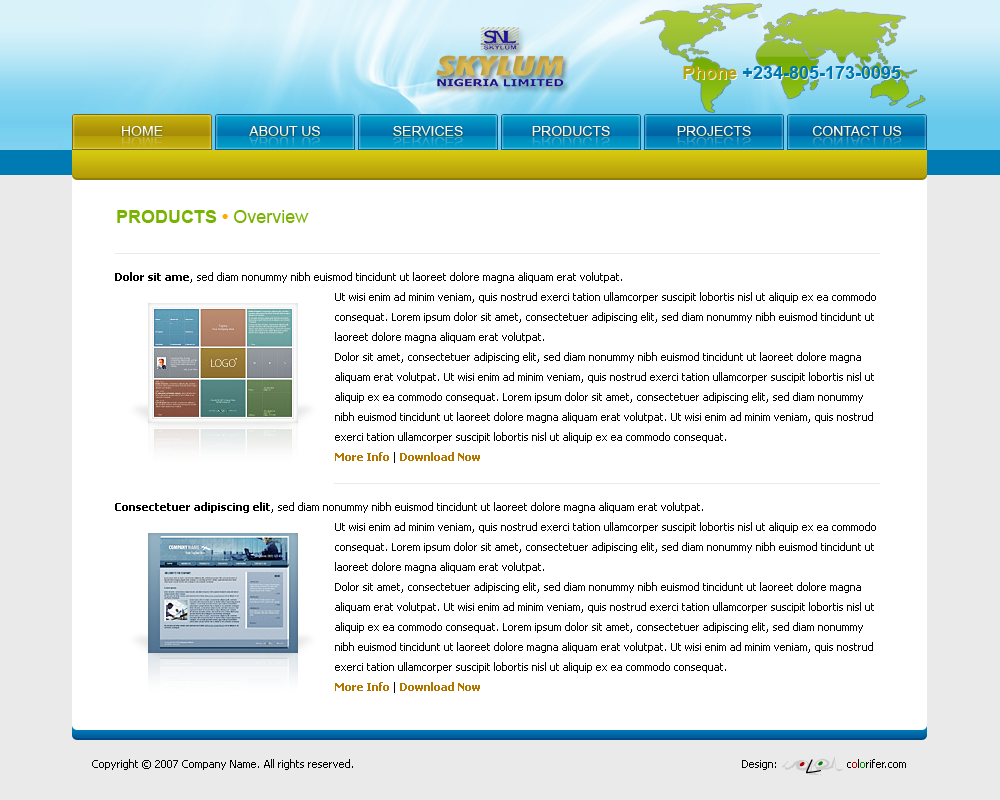
<style>
.page{position:relative;width:1000px;height:800px;background:#ffffff}
.page>*{position:absolute;margin:0}
.t1{font:18px "Arial-BoldMT";color:#0077b1}
.t2{font:18px "Arial-BoldMT";color:#bba40b}
.t3{font:14px "ArialMT";color:#ffffff;text-transform:uppercase}
.t4{font:14px "ArialMT";text-transform:uppercase}
.t5{font:18px "Arial-BoldMT";color:#77b300;text-transform:uppercase}
.t6{font:18px "Arial-BoldMT";color:#ffaa00}
.t7{font:18px "ArialMT";color:#77b300}
.t8{font:11px/20px "Tahoma";color:#000000}
.t9{font:11px/20px "Tahoma-Bold";color:#000000}
.t10{font:11px/20px "Tahoma-Bold";color:#b37700}
.t11{font:11px "Tahoma";color:#000000}
.t12{font:11px "Tahoma";color:#bf0000}
.t13{font:11px "Tahoma";color:#008700}
</style>
<div class="page">
<p class="t1" style="left:683px;top:66px;width:218px;height:13px"><span class="t2">Phone </span>+234-805-173-0095</p>
<p class="t3" style="left:122px;top:126px;width:41px;height:10px">Home</p>
<p class="t3" style="left:249px;top:126px;width:71px;height:10px">about us</p>
<p class="t3" style="left:393px;top:126px;width:70px;height:10px">Services</p>
<p class="t3" style="left:532px;top:126px;width:78px;height:10px">Products</p>
<p class="t3" style="left:677px;top:126px;width:74px;height:10px">projects</p>
<p class="t3" style="left:812px;top:126px;width:90px;height:10px">Contact us</p>
<p class="t4" style="left:122px;top:137px;width:41px;height:10px">Home</p>
<p class="t4" style="left:249px;top:137px;width:71px;height:10px">about us</p>
<p class="t4" style="left:393px;top:137px;width:70px;height:10px">Services</p>
<p class="t4" style="left:532px;top:137px;width:78px;height:10px">Products</p>
<p class="t4" style="left:677px;top:137px;width:74px;height:10px">projects</p>
<p class="t4" style="left:812px;top:137px;width:90px;height:10px">contact us</p>
<p class="t5" style="left:117px;top:210px;width:192px;height:13px">Products <span class="t6">• </span><span class="t7">Overview</span></p>
<p class="t8" style="left:115px;top:272px;width:761px;height:191px"><span class="t9">Dolor sit ame</span>, sed diam nonummy nibh euismod tincidunt ut laoreet dolore magna aliquam erat volutpat. <br>Ut wisi enim ad minim veniam, quis nostrud exerci tation ullamcorper suscipit lobortis nisl ut aliquip ex ea commodo consequat. Lorem ipsum dolor sit amet, consectetuer adipiscing elit, sed diam nonummy nibh euismod tincidunt ut laoreet dolore magna aliquam erat volutpat. <br>Dolor sit amet, consectetuer adipiscing elit, sed diam nonummy nibh euismod tincidunt ut laoreet dolore magna aliquam erat volutpat. Ut wisi enim ad minim veniam, quis nostrud exerci tation ullamcorper suscipit lobortis nisl ut aliquip ex ea commodo consequat. Lorem ipsum dolor sit amet, consectetuer adipiscing elit, sed diam nonummy nibh euismod tincidunt ut laoreet dolore magna aliquam erat volutpat. Ut wisi enim ad minim veniam, quis nostrud exerci tation ullamcorper suscipit lobortis nisl ut aliquip ex ea commodo consequat. <br><span class="t10">More Info</span> | <span class="t10">Download Now</span></p>
<p class="t8" style="left:115px;top:502px;width:761px;height:191px"><span class="t9">Consectetuer adipiscing elit</span>, sed diam nonummy nibh euismod tincidunt ut laoreet dolore magna aliquam erat volutpat. <br>Ut wisi enim ad minim veniam, quis nostrud exerci tation ullamcorper suscipit lobortis nisl ut aliquip ex ea commodo consequat. Lorem ipsum dolor sit amet, consectetuer adipiscing elit, sed diam nonummy nibh euismod tincidunt ut laoreet dolore magna aliquam erat volutpat. <br>Dolor sit amet, consectetuer adipiscing elit, sed diam nonummy nibh euismod tincidunt ut laoreet dolore magna aliquam erat volutpat. Ut wisi enim ad minim veniam, quis nostrud exerci tation ullamcorper suscipit lobortis nisl ut aliquip ex ea commodo consequat. Lorem ipsum dolor sit amet, consectetuer adipiscing elit, sed diam nonummy nibh euismod tincidunt ut laoreet dolore magna aliquam erat volutpat. Ut wisi enim ad minim veniam, quis nostrud exerci tation ullamcorper suscipit lobortis nisl ut aliquip ex ea commodo consequat. <br><span class="t10">More Info</span> | <span class="t10">Download Now</span></p>
<p class="t11" style="left:92px;top:759px;width:261px;height:11px">Copyright © 2007 Company Name. All rights reserved.</p>
<p class="t11" style="left:742px;top:760px;width:34px;height:10px">Design:</p>
<p class="t11" style="left:847px;top:759px;width:59px;height:9px">c<span class="t12">o</span>l<span class="t13">o</span>rifer.com</p>
</div>
